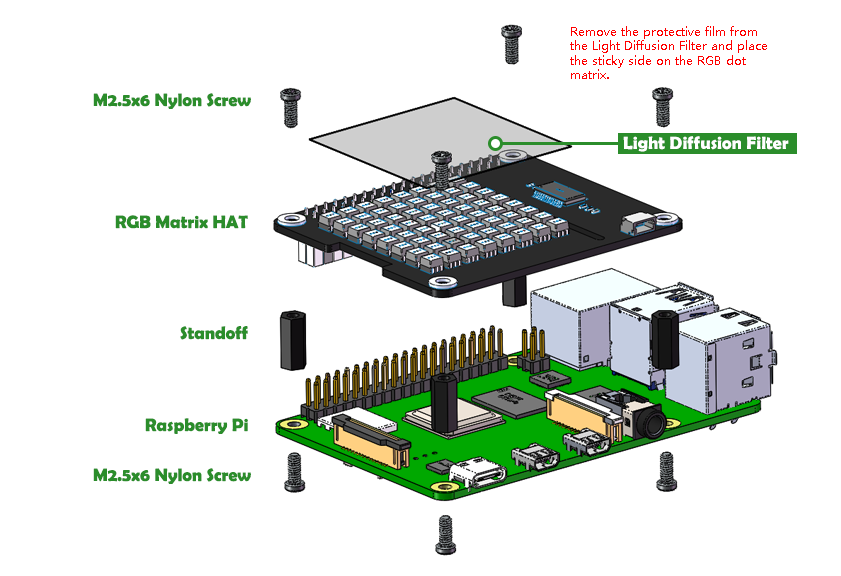
<style>
.page{position:relative;width:841px;height:576px;background:#ffffff}
.page>*{position:absolute;margin:0}
.t1{font:12px "MicrosoftYaHei";color:#ff0000}
.t2{font:18px "BerlinSansFBDemi-Bold";color:#2b8d2b}
.t3{font:18px "BerlinSansFBDemi-Bold";color:#ffffff}
</style>
<div class="page">
<p class="t1" style="left:570px;top:26px;width:197px;height:53px">Remove the protective film from the Light Diffusion Filter and place the sticky side on the RGB dot matrix.</p>
<p class="t2" style="left:93px;top:93px;width:158px;height:16px">M2.5x6 Nylon Screw</p>
<p class="t3" style="left:623px;top:136px;width:166px;height:16px">Light Diffusion Filter</p>
<p class="t2" style="left:115px;top:215px;width:133px;height:14px">RGB Matrix HAT</p>
<p class="t2" style="left:180px;top:326px;width:68px;height:14px">Standoff</p>
<p class="t2" style="left:145px;top:418px;width:103px;height:16px">Raspberry Pi</p>
<p class="t2" style="left:93px;top:468px;width:158px;height:16px">M2.5x6 Nylon Screw</p>
</div>
